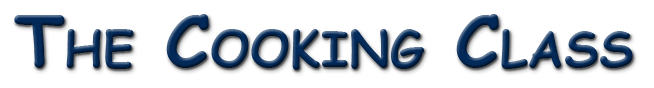
<style>
.page{position:relative;width:654px;height:88px;background:#ffffff}
.page>*{position:absolute;margin:0}
.t1{font:72px "ComicSansMS-Bold";font-variant:small-caps}
</style>
<div class="page">
<p class="t1" style="left:14px;top:14px;width:619px;height:56px">The Cooking Class</p>
</div>
